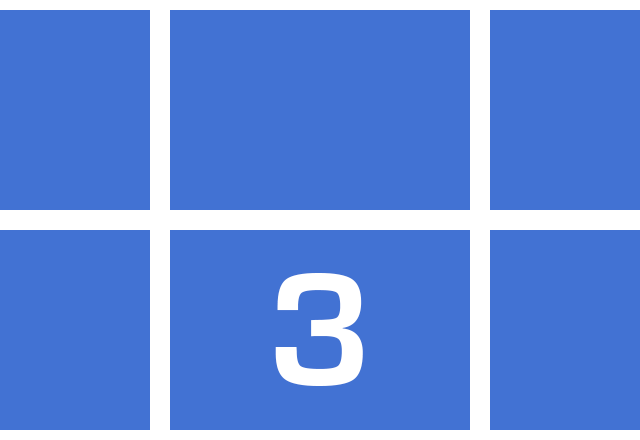
<style>
.page{position:relative;width:640px;height:440px;background:#4272d3}
.page>*{position:absolute;margin:0}
.t1{font:166.7px "EurostileBold";color:#ffffff}
</style>
<div class="page">
<p class="t1" style="left:275px;top:273px;width:88px;height:113px">3</p>
</div>
